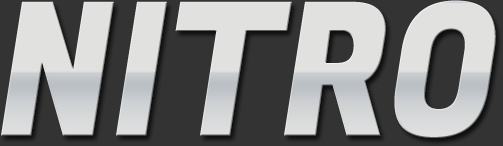
<style>
.page{position:relative;width:503px;height:146px;background:#333333}
.page>*{position:absolute;margin:0}
.t1{font:185.2px "FugazOne-Regular";color:#dfdfdf;scale:0.89 1}
</style>
<div class="page">
<p class="t1" style="left:1px;top:0px;width:495px;height:138px">NITRO</p>
</div>
